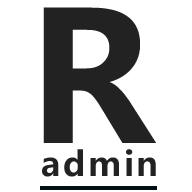
<style>
.page{position:relative;width:192px;height:192px;background:#ffffff}
.page>*{position:absolute;margin:0}
.t1{font:178.8px "MicrosoftYaHei-Bold";letter-spacing:0.075em;color:#222222}
.t2{font:33.5px "MicrosoftYaHei-Bold";letter-spacing:0.075em;color:#222222}
</style>
<div class="page">
<p class="t1" style="left:43px;top:7px;width:113px;height:136px">R</p>
<p class="t2" style="left:42px;top:149px;width:114px;height:28px">admin</p>
</div>
